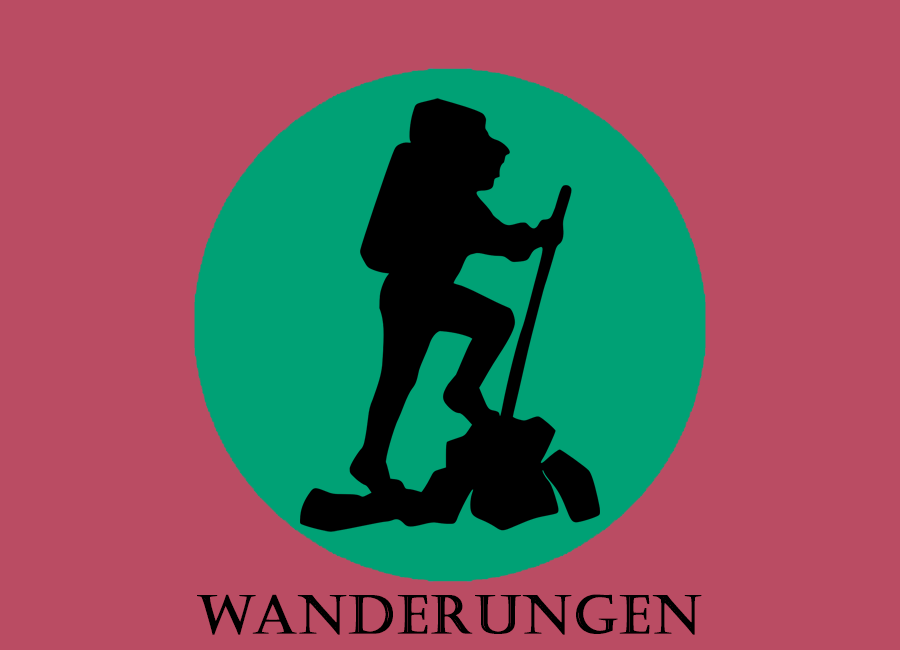
<style>
.page{position:relative;width:900px;height:650px;background:#ba4c63}
.page>*{position:absolute;margin:0}
.t1{font:53px "Castellar";letter-spacing:0.025em;color:#000000;font-weight:bold}
</style>
<div class="page">
<p class="t1" style="left:197px;top:594px;width:505px;height:41px">Wanderungen</p>
</div>
